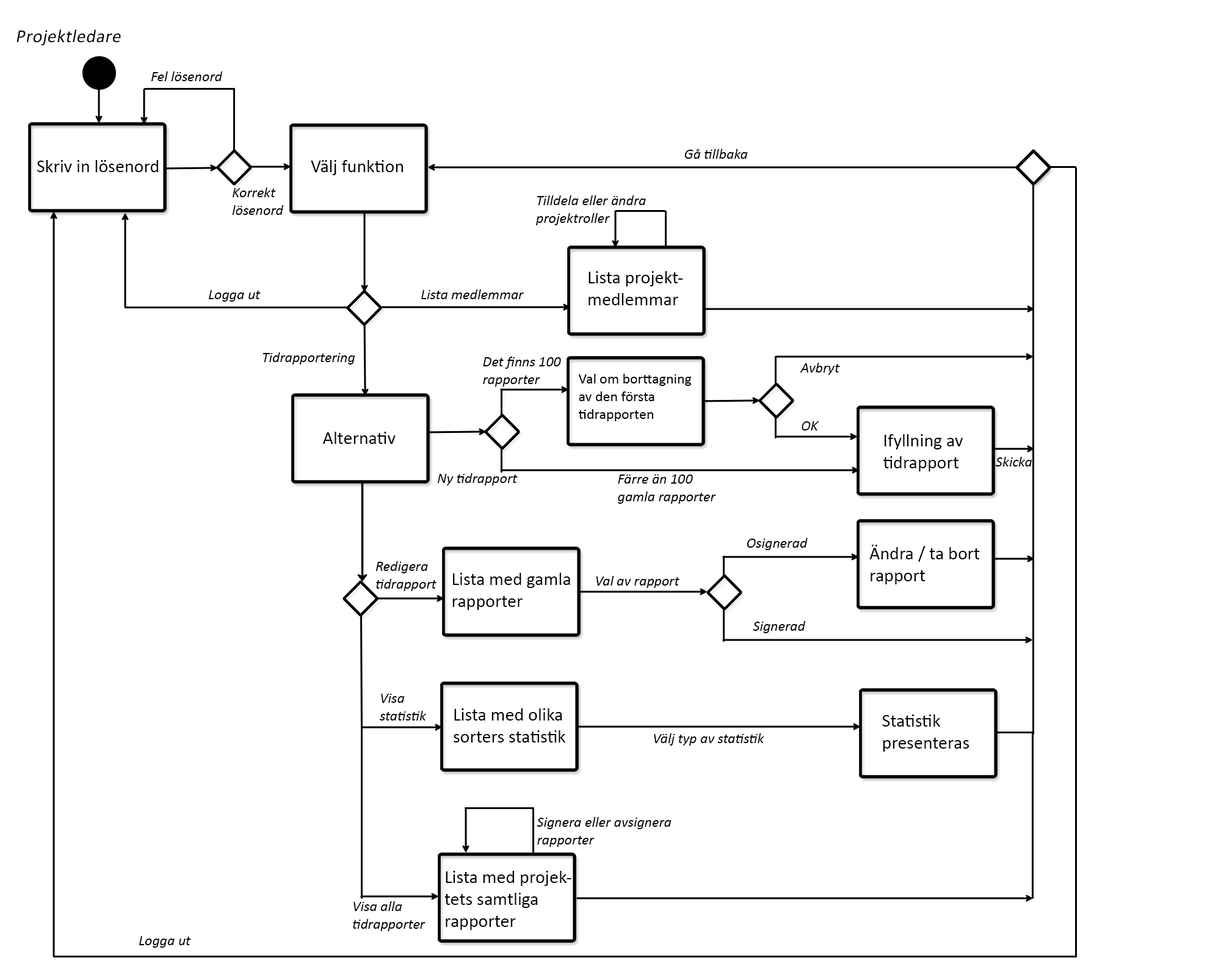
<style>
.page{position:relative;width:1221px;height:977px;background:#ffffff}
.page>*{position:absolute;margin:0}
.t1{font:18.3px "Calibri";letter-spacing:0.02em;color:#000000;font-style:italic}
.t2{font:14.7px "Calibri-Italic";color:#000000}
.t3{font:18.3px "Calibri";color:#000000}
.t4{font:14.7px "Calibri";color:#000000}
</style>
<div class="page">
<p class="t1" style="left:16px;top:29px;width:105px;height:17px">Projektledare</p>
<p class="t2" style="left:151px;top:71px;width:72px;height:10px">Fel lösenord</p>
<p class="t2" style="left:684px;top:149px;width:64px;height:10px">Gå tillbaka</p>
<p class="t3" style="left:37px;top:160px;width:121px;height:12px">Skriv in lösenord</p>
<p class="t3" style="left:311px;top:160px;width:92px;height:15px">Välj funktion</p>
<p class="t2" style="left:232px;top:187px;width:52px;height:28px;text-align:right">Korrekt <br>lösenord</p>
<p class="t2" style="left:535px;top:195px;width:111px;height:30px;text-align:right">Tilldela eller ändra <br>projektroller</p>
<p class="t3" style="left:588px;top:271px;width:95px;height:34px;text-align:right">Lista projekt-medlemmar</p>
<p class="t2" style="left:209px;top:290px;width:52px;height:12px">Logga ut</p>
<p class="t2" style="left:421px;top:289px;width:103px;height:10px">Lista medlemmar</p>
<p class="t2" style="left:262px;top:352px;width:93px;height:12px">Tidrapportering</p>
<p class="t2" style="left:483px;top:356px;width:78px;height:30px;text-align:right">Det finns 100 rapporter</p>
<p class="t2" style="left:800px;top:363px;width:40px;height:12px">Avbryt</p>
<p class="t4" style="left:578px;top:374px;width:114px;height:47px;text-align:right">Val om borttagning <br>av den första <br>tidrapporten</p>
<p class="t2" style="left:802px;top:421px;width:17px;height:9px">OK</p>
<p class="t3" style="left:323px;top:432px;width:73px;height:12px">Alternativ</p>
<p class="t3" style="left:883px;top:434px;width:80px;height:37px;text-align:right">Ifyllning av tidrapport</p>
<p class="t2" style="left:995px;top:457px;width:37px;height:9px">Skicka</p>
<p class="t2" style="left:437px;top:473px;width:81px;height:12px">Ny tidrapport</p>
<p class="t2" style="left:618px;top:474px;width:98px;height:30px;text-align:right">Färre än 100 <br>gamla rapporter</p>
<p class="t2" style="left:747px;top:538px;width:61px;height:12px">Osignerad</p>
<p class="t3" style="left:869px;top:545px;width:111px;height:39px;text-align:right">Ändra / ta bort rapport</p>
<p class="t2" style="left:375px;top:561px;width:61px;height:30px;text-align:right">Redigera<br>tidrapport</p>
<p class="t3" style="left:452px;top:573px;width:118px;height:37px;text-align:right">Lista med gamla rapporter</p>
<p class="t2" style="left:596px;top:576px;width:83px;height:12px">Val av rapport</p>
<p class="t2" style="left:753px;top:621px;width:53px;height:12px">Signerad</p>
<p class="t2" style="left:380px;top:693px;width:47px;height:27px;text-align:right">Visa <br>statistik</p>
<p class="t3" style="left:454px;top:708px;width:111px;height:34px;text-align:right">Lista med olika sorters statistik</p>
<p class="t3" style="left:882px;top:714px;width:87px;height:37px;text-align:right">Statistik  <br>presenteras</p>
<p class="t2" style="left:654px;top:733px;width:110px;height:12px">Välj typ av statistik</p>
<p class="t2" style="left:537px;top:817px;width:134px;height:30px;text-align:right">Signera eller avsignera rapporter</p>
<p class="t3" style="left:444px;top:870px;width:127px;height:60px;text-align:right">Lista med projektets samtliga<br>rapporter</p>
<p class="t2" style="left:353px;top:901px;width:72px;height:30px;text-align:right">Visa alla <br>tidrapporter</p>
<p class="t2" style="left:139px;top:936px;width:52px;height:11px">Logga ut</p>
</div>
